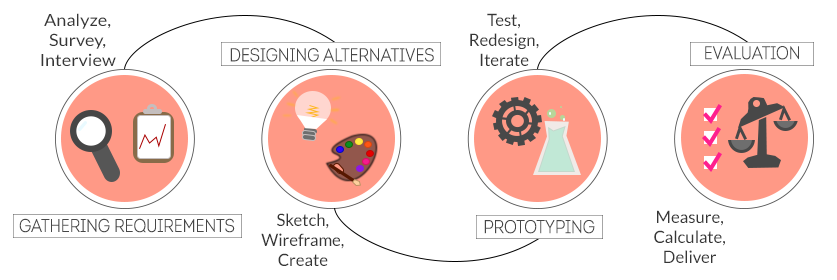
<style>
.page{position:relative;width:837px;height:280px;background:#ffffff}
.page>*{position:absolute;margin:0}
.t1{font:16.7px "Lato-Regular";color:#363636;scale:1.09 1}
.t2{font:16.7px "Lato-Regular";color:#363636}
.t3{font:18.4px "IntroCondLightFree";color:#464646}
</style>
<div class="page">
<p class="t1" style="left:41px;top:13px;width:75px;height:53px;text-align:center">Analyze,<br>Survey,<br>Interview</p>
<p class="t2" style="left:470px;top:13px;width:69px;height:53px;text-align:center">Test,<br>Redesign,<br>Iterate</p>
<p class="t3" style="left:230px;top:48px;width:204px;height:14px">DESIGNING ALTERNATIVES</p>
<p class="t3" style="left:705px;top:46px;width:94px;height:14px">EVALUATION</p>
<p class="t3" style="left:19px;top:218px;width:216px;height:15px">GATHERING REQUIREMENTS</p>
<p class="t2" style="left:261px;top:213px;width:83px;height:53px;text-align:center">Sketch,<br>Wireframe,<br>Create</p>
<p class="t3" style="left:484px;top:220px;width:111px;height:14px">PROTOTYPING</p>
<p class="t2" style="left:654px;top:210px;width:71px;height:53px;text-align:center">Measure,<br>Calculate,<br>Deliver</p>
</div>
